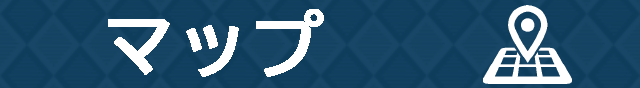
<style>
.page{position:relative;width:640px;height:88px}
.page>*{position:absolute;margin:0}
.t1{font:72px "BIZ-UDGothic-Bold";color:#ffffff;font-weight:bold}
</style>
<div class="page">
<p class="t1" style="left:108px;top:9px;width:216px;height:68px">マップ</p>
</div>
